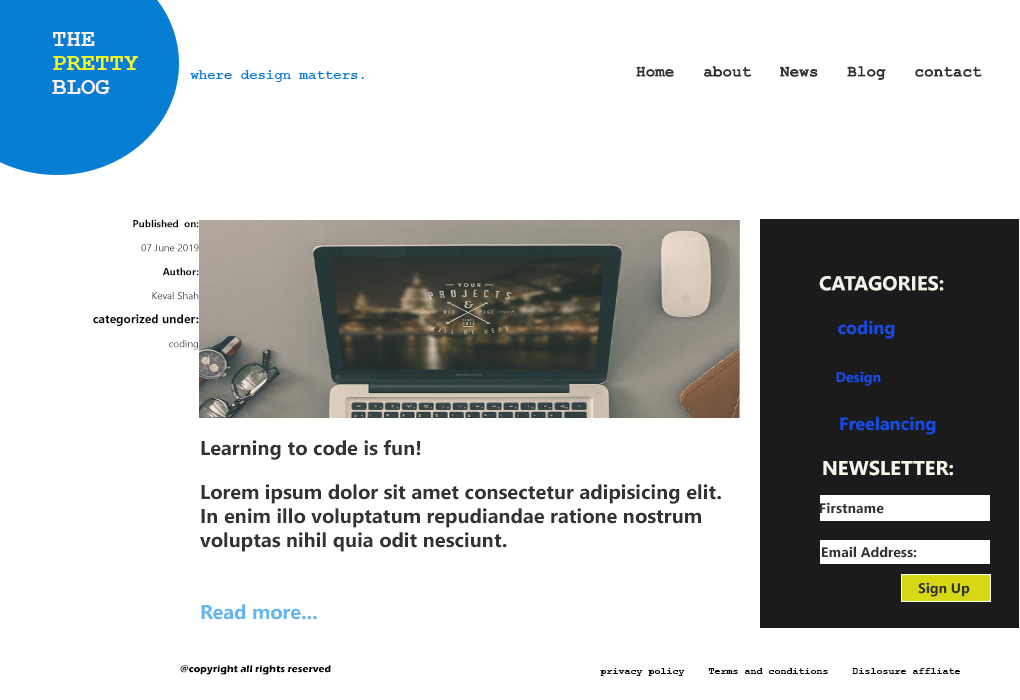
<style>
.page{position:relative;width:1020px;height:700px;background:#ffffff}
.page>*{position:absolute;margin:0}
.t1{font:24px/24px "CourierNewPS-BoldMT";color:#f2fa22}
.t2{font:24px/24px "CourierNewPS-BoldMT";color:#f7f2f2}
.t3{font:24px/24px "CourierNewPS-BoldMT";color:#fbf1f1}
.t4{font:14px "CourierNewPS-BoldMT";color:#057ed3}
.t5{font:24px "CourierNewPS-BoldMT";color:#aba0ad}
.t6{font:16px "CourierNewPS-BoldMT";color:#333333}
.t7{font:12px/24px "NirmalaUI-Bold";color:#090908}
.t8{font:20px/24px "NirmalaUI-Bold";color:#d6d813}
.t9{font:10px/24px "NirmalaUI-Bold";color:#0a0a09}
.t10{font:10px/24px "NirmalaUI";color:#080808}
.t11{font:10px/24px "NirmalaUI-Bold";color:#090908}
.t12{font:20px "NirmalaUI-Bold";color:#f2f2e8}
.t13{font:18px/24px "NirmalaUI-Bold";color:#174be0}
.t14{font:20px/24px "NirmalaUI-Bold";color:#f2f2e8}
.t15{font:14px/24px "NirmalaUI-Bold";color:#174be0}
.t16{font:20px "NirmalaUI-Bold";color:#333333}
.t17{font:16px "CourierNewPS-BoldMT";color:#d6d813}
.t18{font:20px "NirmalaUI-Bold";color:#f6f6ec}
.t19{font:20px "NirmalaUI-Bold";color:#d6d813}
.t20{font:20px/24px "NirmalaUI-Bold";color:#333333}
.t21{font:20px/24px "NirmalaUI-Bold";color:#64b7f2}
.t22{font:14px "NirmalaUI-Bold";color:#333333}
.t23{font:10px "ErasITC-Bold";color:#070707}
.t24{font:10px "CourierNewPS-BoldMT";color:#0a0a09}
</style>
<div class="page">
<p class="t1" style="left:52px;top:32px;width:86px;height:62px"><span class="t2">THE<br></span>PRETTY<br><span class="t3">BLOG</span></p>
<p class="t4" style="left:190px;top:70px;width:174px;height:12px"><span class="t5"> </span>where design matters.</p>
<p class="t6" style="left:636px;top:66px;width:346px;height:14px">Home   about   News   Blog   contact</p>
<p class="t7" style="left:93px;top:219px;width:106px;height:131px"><span class="t8"><br>   </span><span class="t9">Published  on:<br>                     </span><span class="t10"> 07 June 2019<br></span><span class="t11">Author:<br>     </span><span class="t10">Keval Shah<br> </span>categorized under:<br><span class="t10">coding</span></p>
<p class="t12" style="left:819px;top:276px;width:125px;height:15px">CATAGORIES:</p>
<p class="t13" style="left:836px;top:320px;width:100px;height:115px"><span class="t14"><br>  </span>coding<br><br><span class="t15">  Design<br><br>  </span>Freelancing</p>
<p class="t16" style="left:201px;top:440px;width:220px;height:20px"><span class="t17"> <br></span>Learning to code is fun!</p>
<p class="t18" style="left:823px;top:460px;width:130px;height:16px"><span class="t19"><br></span>NEWSLETTER:</p>
<p class="t20" style="left:200px;top:484px;width:521px;height:136px">Lorem ipsum dolor sit amet consectetur adipisicing elit. In enim illo voluptatum repudiandae ratione nostrum voluptas nihil quia odit nesciunt.<br><br><br><span class="t21">Read more...</span></p>
<p class="t22" style="left:820px;top:502px;width:64px;height:12px">Firstname</p>
<p class="t22" style="left:822px;top:546px;width:95px;height:12px">Email Address:</p>
<p class="t22" style="left:918px;top:582px;width:52px;height:15px">Sign Up</p>
<p class="t23" style="left:180px;top:665px;width:151px;height:10px">@copyright all rights reserved</p>
<p class="t24" style="left:600px;top:668px;width:361px;height:8px">privacy policy    Terms and conditions    Dislosure affliate</p>
</div>
